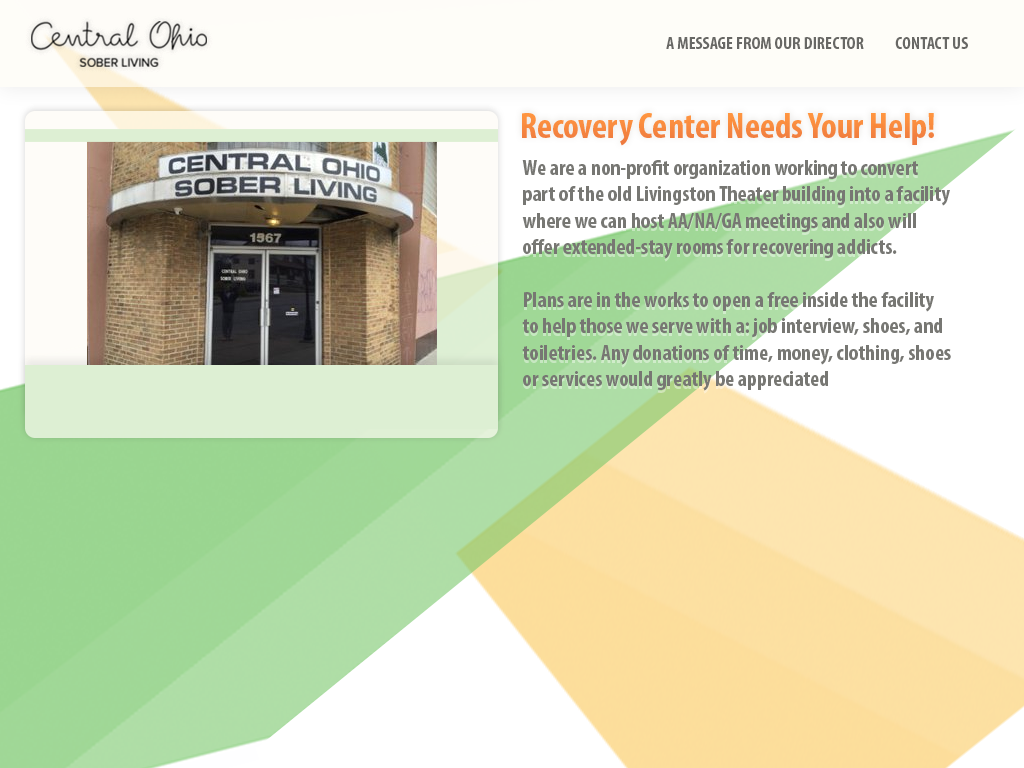
<style>
.page{position:relative;width:1024px;height:768px}
.page>*{position:absolute;margin:0}
.t1{font:17.8px "MyriadPro-BoldCond";color:#686765}
.t2{font:36px "MyriadPro-BoldCond";color:#f7893f}
.t3{font:22px "MyriadPro-BoldCond";color:#777773}
</style>
<div class="page">
<p class="t1" style="left:666px;top:37px;width:198px;height:12px">A MESSAGE FROM OUR DIRECTOR</p>
<p class="t1" style="left:895px;top:37px;width:73px;height:12px">CONTACT US</p>
<p class="t2" style="left:522px;top:113px;width:412px;height:33px">Recovery Center Needs Your Help!</p>
<p class="t3" style="left:522px;top:160px;width:429px;height:231px">We are a non-profit organization working to convert part of the old Livingston Theater building into a facility where we can host AA/NA/GA meetings and also will offer extended-stay rooms for recovering addicts. <br><br>Plans are in the works to open a free inside the facility to help those we serve with a: job interview, shoes, and toiletries. Any donations of time, money, clothing, shoes or services would greatly be appreciated</p>
</div>
